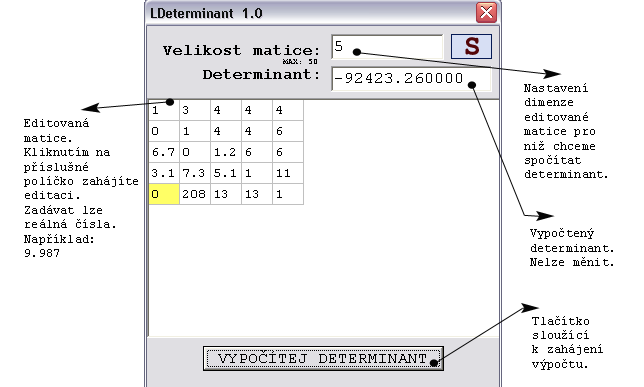
<style>
.page{position:relative;width:644px;height:387px;background:#ffffff}
.page>*{position:absolute;margin:0}
.t1{font:12px "CourierNewPSMT";color:#050505}
</style>
<div class="page">
<p class="t1" style="left:524px;top:83px;width:83px;height:95px">Nastavení<br>dimenze<br>editované<br>matice pro <br>niž chceme<br>spočítat<br>determinant.</p>
<p class="t1" style="left:24px;top:118px;width:114px;height:139px">Editovaná <br>matice. <br>Kliknutím na <br>příslušné <br>políčko zahájíte<br>editaci. <br>Zadávat lze <br>reálná čísla. <br>Například:<br>9.987</p>
<p class="t1" style="left:530px;top:228px;width:83px;height:38px">Vypočtený<br>determinant.<br>Nelze měnit.</p>
<p class="t1" style="left:532px;top:316px;width:71px;height:54px">Tlačítko<br>sloužící <br>k zahájení<br>výpočtu.</p>
</div>
